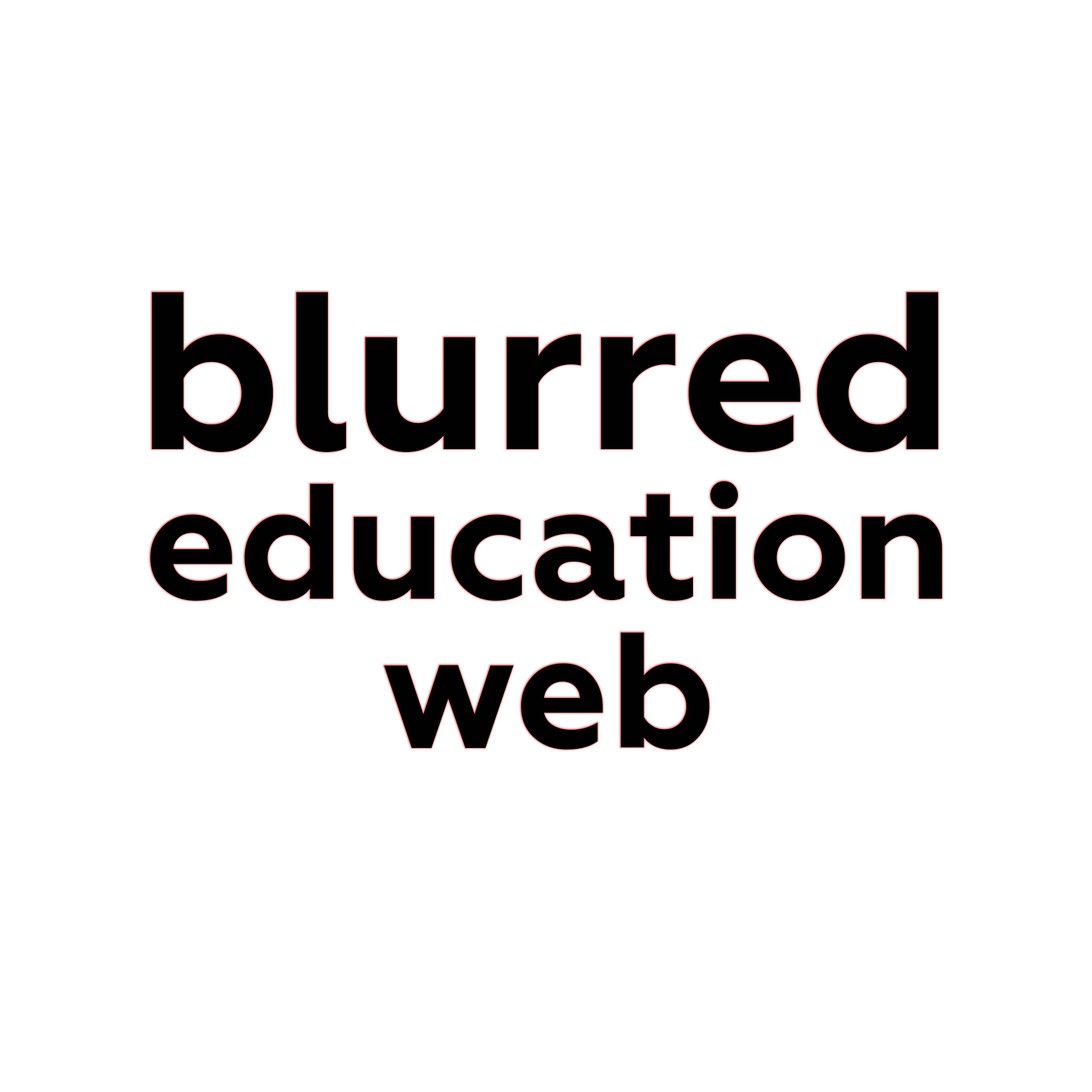
<style>
.page{position:relative;width:1092px;height:1092px;background:#ffffff}
.page>*{position:absolute;margin:0}
.t1{font:224.2px "Geometria-Bold";color:#010101}
.t2{font:164px "Geometria-Bold";color:#010101}
</style>
<div class="page">
<p class="t1" style="left:152px;top:292px;width:786px;height:161px">blurred</p>
<p class="t2" style="left:150px;top:481px;width:793px;height:120px">education</p>
<p class="t2" style="left:384px;top:632px;width:326px;height:118px">web</p>
</div>
